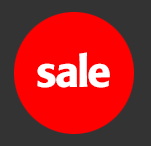
<style>
.page{position:relative;width:151px;height:146px;background:#333333}
.page>*{position:absolute;margin:0}
.t1{font:43px "FormataBQ-Medium";letter-spacing:-0.05em;color:#ffffff}
</style>
<div class="page">
<p class="t1" style="left:37px;top:52px;width:73px;height:36px">sale</p>
</div>
